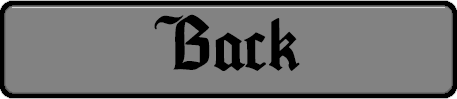
<style>
.page{position:relative;width:457px;height:99px;background:#828282}
.page>*{position:absolute;margin:0}
.t1{font:66.7px "Seagramtfb";color:#000000}
</style>
<div class="page">
<p class="t1" style="left:154px;top:14px;width:146px;height:57px">Back</p>
</div>
